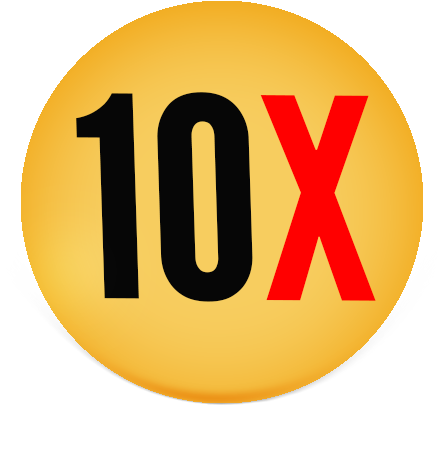
<style>
.page{position:relative;width:447px;height:452px;background:#ffffff}
.page>*{position:absolute;margin:0}
.t1{font:279px "LeagueGothic-Regular";color:#060606;scale:1.14 1}
.t2{font:279px "LeagueGothic-Regular";color:#ff0000;scale:1.14 1}
</style>
<div class="page">
<p class="t1" style="left:76px;top:92px;width:300px;height:210px">10<span class="t2">X</span></p>
</div>
